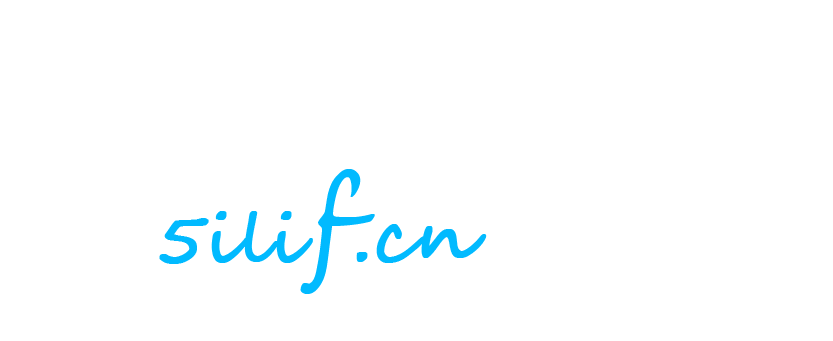
<style>
.page{position:relative;width:833px;height:341px;background:#ffffff}
.page>*{position:absolute;margin:0}
.t1{font:66.7px "SegoeScript";color:#01baff;font-weight:bold}
.t2{font:125px "SegoeScript";color:#01baff}
.t3{font:75px "SegoeScript";color:#01baff;font-weight:bold}
</style>
<div class="page">
<p class="t1" style="left:159px;top:169px;width:328px;height:125px">5ili<span class="t2">f</span><span class="t3">.cn</span></p>
</div>
